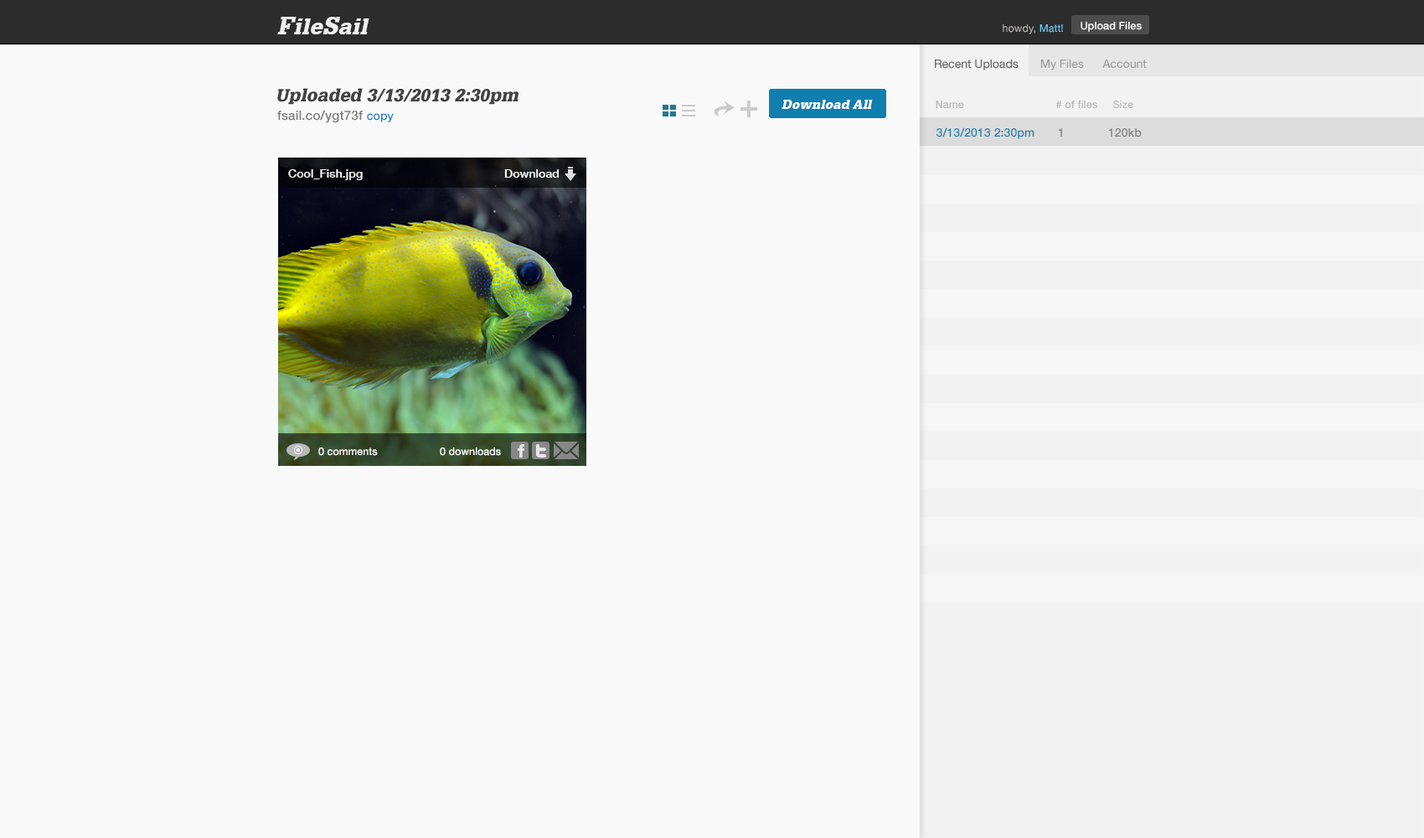
<style>
.page{position:relative;width:1424px;height:838px;background:#f9f9f9}
.page>*{position:absolute;margin:0}
.t1{font:22.1px "GlyphaLT-BlackOblique";letter-spacing:0.025em;color:#eeeeee}
.t2{font:24.4px "GlyphaLT-BlackOblique";letter-spacing:0.025em;color:#eeeeee}
.t3{font:10.5px "HelveticaNeue";letter-spacing:0.01em;color:#bcb5b5}
.t4{font:10.5px "HelveticaNeue";letter-spacing:0.01em;color:#6dcefb}
.t5{font:10.5px "HelveticaNeue-Medium";letter-spacing:0.01em;color:#ffffff}
.t6{font:11.6px "HelveticaNeue-Medium";letter-spacing:-0.01em;color:#6b6b6b}
.t7{font:11.6px "HelveticaNeue-Medium";letter-spacing:-0.01em;color:#9f9f9f}
.t8{font:17.4px "GlyphaLT-BlackOblique";letter-spacing:0.01em;color:#424242}
.t9{font:12.8px "GlyphaLT-BlackOblique";letter-spacing:0.01em;color:#ffffff}
.t10{font:10.5px "HelveticaNeue-Medium";letter-spacing:0.01em;color:#b9b8b8}
.t11{font:12.8px "HelveticaNeue-Medium";letter-spacing:0.01em;color:#7b7b7b}
.t12{font:11.6px "HelveticaNeue-Medium";letter-spacing:0.01em;color:#127fd3}
.t13{font:11.6px "HelveticaNeue-Medium";letter-spacing:0.01em;color:#7e7f7f}
.t14{font:11.6px "HelveticaNeue-Medium";letter-spacing:0.01em;color:#1f80ad}
.t15{font:11.6px "HelveticaNeue-Medium";letter-spacing:0.01em;color:#f5f5f5}
.t16{font:11.6px "HelveticaNeue-Medium";letter-spacing:0.01em;color:#ffffff}
.t17{font:10.5px "HelveticaNeue";letter-spacing:0.01em;color:#ffffff}
</style>
<div class="page">
<p class="t1" style="left:277px;top:17px;width:92px;height:17px"><span class="t2">F</span>ile<span class="t2">S</span>ail</p>
<p class="t3" style="left:1003px;top:24px;width:60px;height:10px">howdy, <span class="t4">Matt!</span></p>
<p class="t5" style="left:1080px;top:22px;width:62px;height:10px">Upload Files</p>
<p class="t6" style="left:935px;top:59px;width:83px;height:11px">Recent Uploads</p>
<p class="t7" style="left:1040px;top:59px;width:107px;height:11px">My Files      Account</p>
<p class="t8" style="left:277px;top:88px;width:241px;height:17px">Uploaded 3/13/2013 2:30pm</p>
<p class="t9" style="left:781px;top:100px;width:92px;height:9px">Download All</p>
<p class="t10" style="left:936px;top:100px;width:197px;height:9px">Name    # of files     Size</p>
<p class="t11" style="left:277px;top:110px;width:117px;height:13px">fsail.co/ygt73f <span class="t12">copy</span></p>
<p class="t13" style="left:936px;top:127px;width:206px;height:12px"><span class="t14">3/13/2013 2:30pm       </span>1             120kb</p>
<p class="t15" style="left:288px;top:169px;width:75px;height:11px">Cool_Fish.jpg</p>
<p class="t16" style="left:504px;top:169px;width:55px;height:9px">Download</p>
<p class="t17" style="left:318px;top:447px;width:60px;height:9px">0 comments</p>
<p class="t17" style="left:440px;top:447px;width:61px;height:9px">0 downloads</p>
</div>
